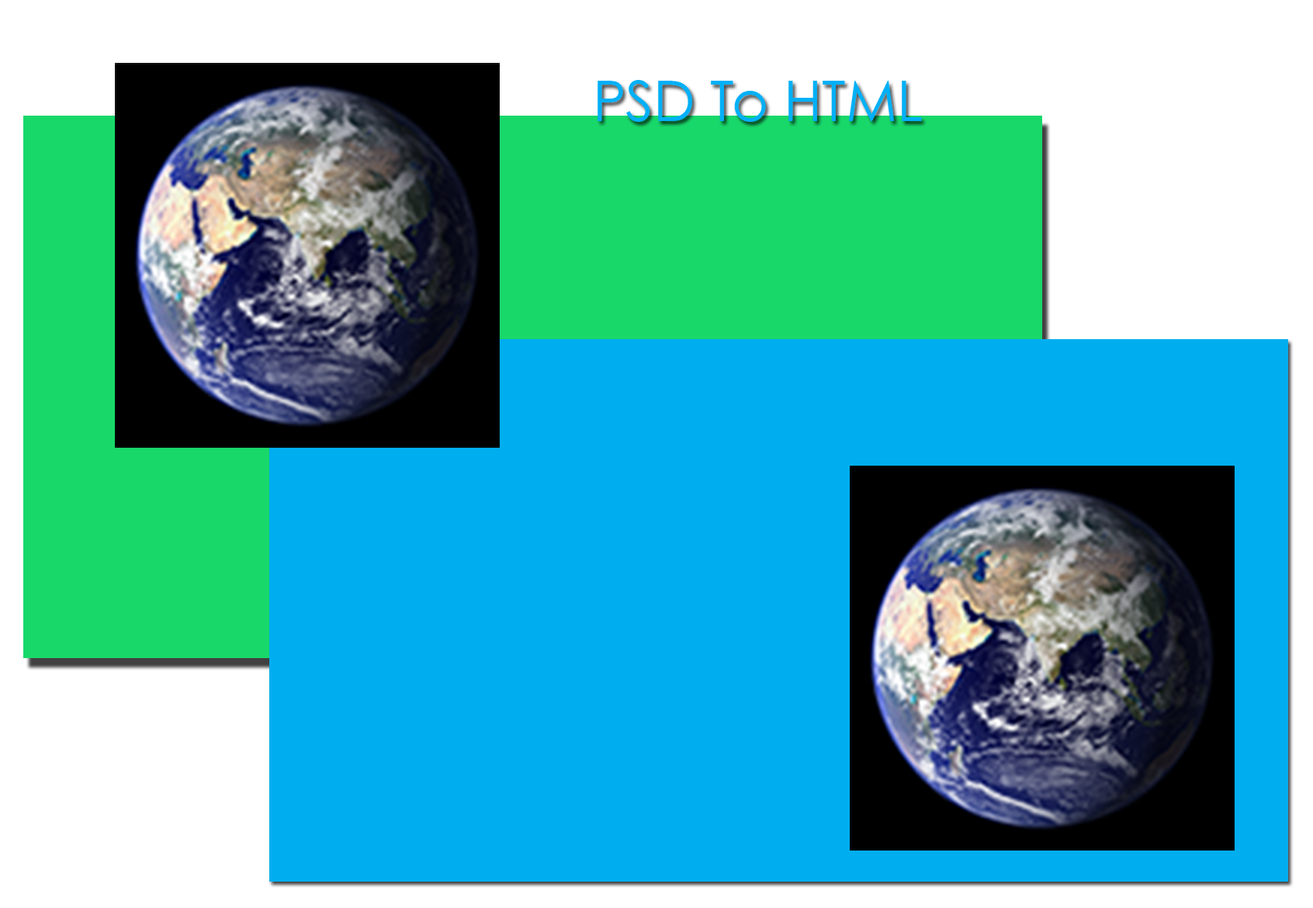
<style>
.page{position:relative;width:1313px;height:908px;background:#00aeef}
.page>*{position:absolute;margin:0}
.t1{font:55.9px "CenturyGothic";color:#00b0f6}
</style>
<div class="page">
<p class="t1" style="left:598px;top:80px;width:324px;height:42px">PSD To HTML</p>
</div>
